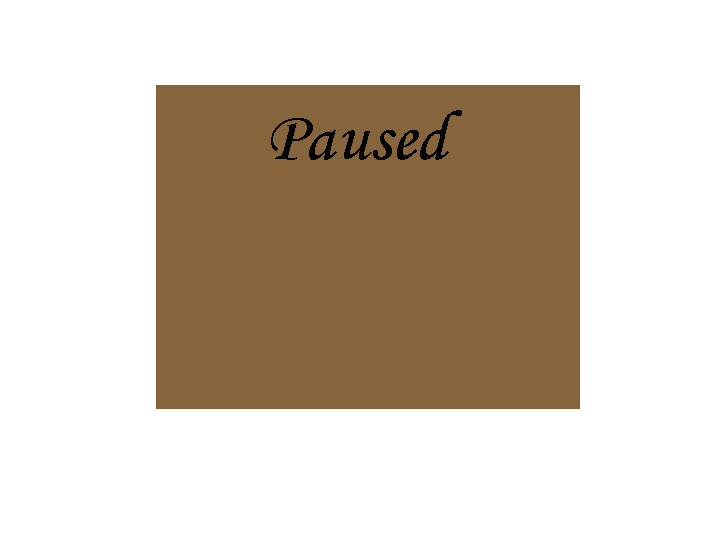
<style>
.page{position:relative;width:720px;height:540px;background:#ffffff}
.page>*{position:absolute;margin:0}
.t1{font:70.6px "MonotypeCorsiva";color:#000000}
</style>
<div class="page">
<p class="t1" style="left:271px;top:110px;width:191px;height:50px">Paused</p>
</div>
